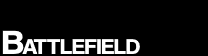
<style>
.page{position:relative;width:208px;height:56px;background:#000000}
.page>*{position:absolute;margin:0}
.t1{font:35px "CoolveticaRg-Bold";color:#ffffff;font-variant:small-caps;scale:1.05 1}
</style>
<div class="page">
<p class="t1" style="left:2px;top:30px;width:138px;height:24px">Battlefield</p>
</div>
